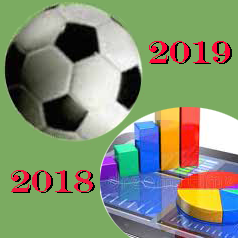
<style>
.page{position:relative;width:238px;height:238px;background:#7bab61}
.page>*{position:absolute;margin:0}
.t1{font:32px "EngraversMT";color:#ff0537}
.t2{font:32px "EngraversMT"}
.t3{font:32px "EngraversMT";color:#f1163d}
</style>
<div class="page">
<p class="t1" style="left:149px;top:41px;width:81px;height:22px">2019</p>
<p class="t2" style="left:151px;top:42px;width:81px;height:22px">2019</p>
<p class="t3" style="left:11px;top:170px;width:82px;height:22px">2018</p>
<p class="t2" style="left:13px;top:171px;width:82px;height:22px">2018</p>
</div>
